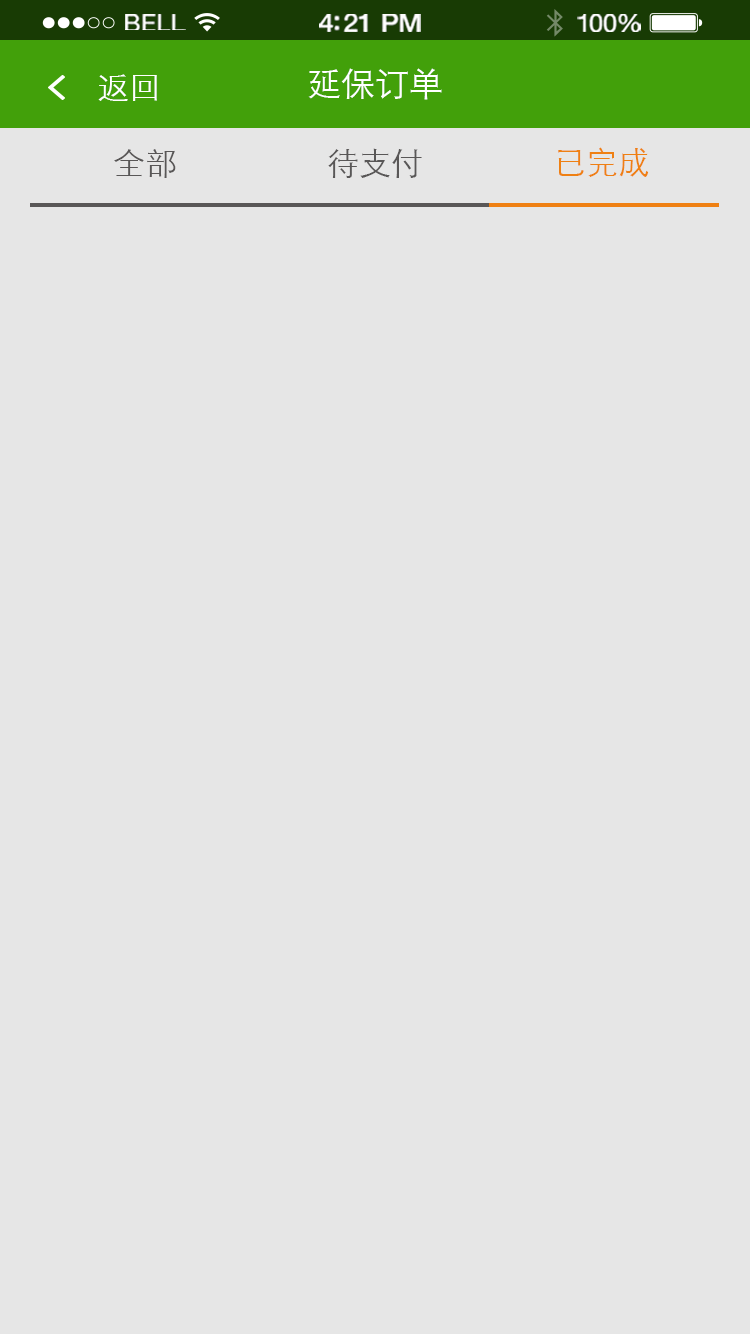
<style>
.page{position:relative;width:750px;height:1334px;background:#e6e6e6}
.page>*{position:absolute;margin:0}
.t1{font:23.3px "HelveticaNeue";letter-spacing:0.02em;color:#ffffff;scale:1.06 1}
.t2{font:25.3px "HelveticaNeue-Medium";letter-spacing:-0.02em;color:#ffffff;scale:1.06 1}
.t3{font:24.3px "HelveticaNeue";letter-spacing:-0.02em;color:#ffffff;scale:1.06 1}
.t4{font:32px "STXihei";color:#ffffff}
.t5{font:34px "STXihei";color:#ffffff}
.t6{font:32px "STXihei";color:#595757}
.t7{font:32px "STXihei";color:#ef8013}
</style>
<div class="page">
<p class="t1" style="left:125px;top:14px;width:61px;height:16px">BELL</p>
<p class="t2" style="left:319px;top:14px;width:102px;height:18px">4:21 PM</p>
<p class="t3" style="left:577px;top:14px;width:64px;height:18px">100%</p>
<p class="t4" style="left:98px;top:74px;width:59px;height:27px">返回</p>
<p class="t5" style="left:308px;top:68px;width:134px;height:32px">延保订单</p>
<p class="t6" style="left:114px;top:149px;width:62px;height:29px">全部</p>
<p class="t6" style="left:328px;top:148px;width:94px;height:30px">待支付</p>
<p class="t7" style="left:558px;top:147px;width:91px;height:30px">已完成</p>
</div>
